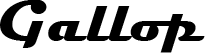
<style>
.page{position:relative;width:205px;height:53px;background:#ffffff}
.page>*{position:absolute;margin:0}
.t1{font:60px "Magneto-Bold";color:#000000}
</style>
<div class="page">
<p class="t1" style="left:0px;top:0px;width:205px;height:53px">Gallop</p>
</div>
